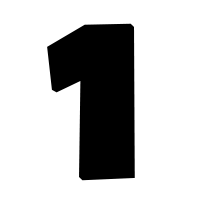
<style>
.page{position:relative;width:200px;height:200px;background:#ffffff}
.page>*{position:absolute;margin:0}
.t1{font:240px "Troika";color:#000000;font-weight:bold}
</style>
<div class="page">
<p class="t1" style="left:47px;top:23px;width:88px;height:158px">1</p>
</div>
